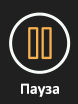
<style>
.page{position:relative;width:78px;height:104px;background:#202020}
.page>*{position:absolute;margin:0}
.t1{font:12px "Calibri-Bold";color:#ffffff}
</style>
<div class="page">
<p class="t1" style="left:21px;top:83px;width:38px;height:14px">Пауза</p>
</div>
